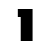
<style>
.page{position:relative;width:50px;height:50px;background:#ffffff}
.page>*{position:absolute;margin:0}
.t1{font:48px "Vipnagorgialla-Regular";color:#000000}
</style>
<div class="page">
<p class="t1" style="left:17px;top:9px;width:16px;height:32px">1</p>
</div>
